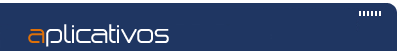
<style>
.page{position:relative;width:406px;height:51px;background:#1f3662}
.page>*{position:absolute;margin:0}
.t1{font:24px "Birdman";color:#ffffff}
.t2{font:24px "Birdman";color:#de7008}
</style>
<div class="page">
<p class="t1" style="left:28px;top:24px;width:141px;height:23px"><span class="t2">a</span>plicativos</p>
</div>
